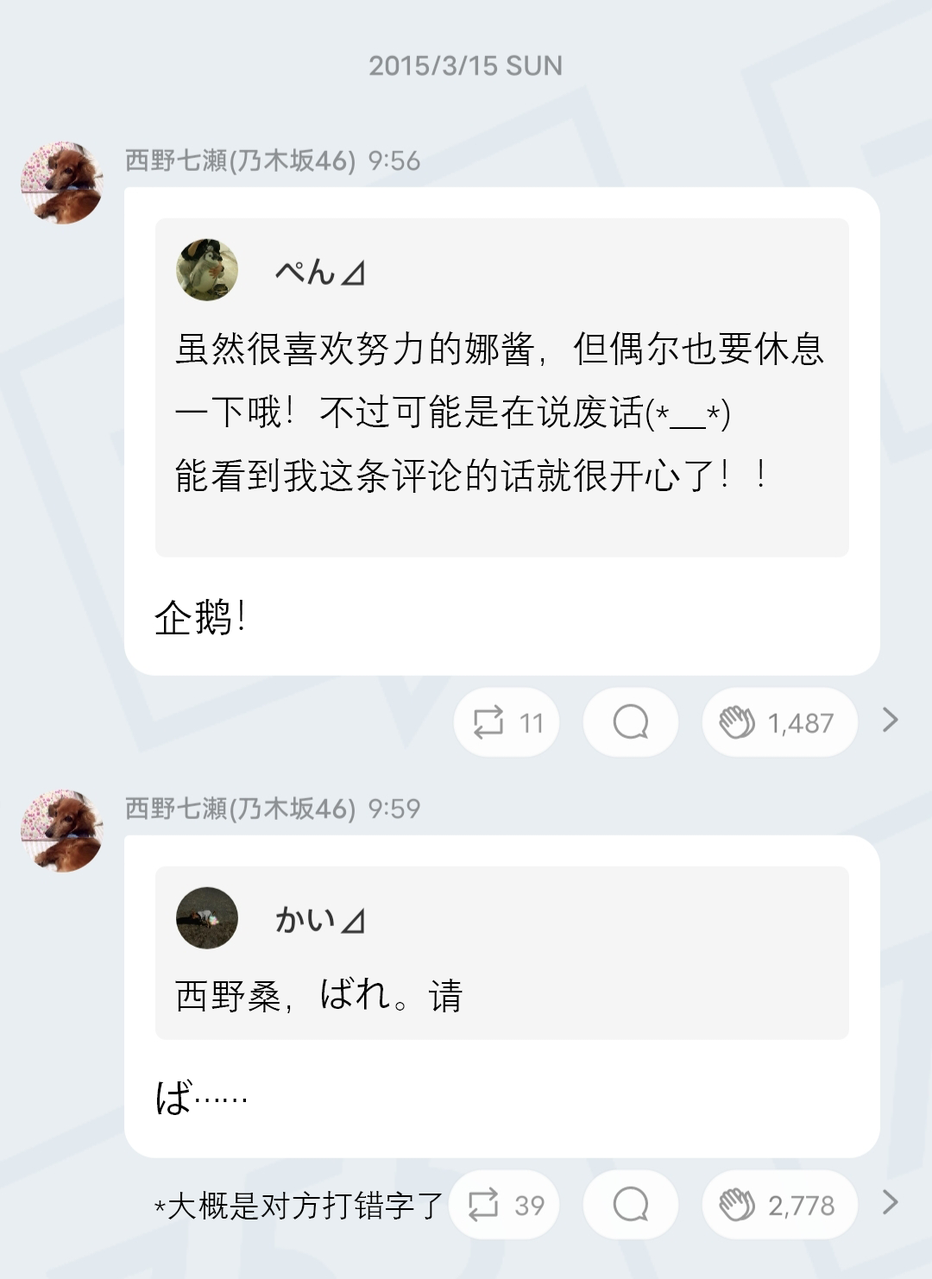
<style>
.page{position:relative;width:932px;height:1279px;background:#e9eef2}
.page>*{position:absolute;margin:0}
.t1{font:36.3px "DengXian";color:#000000}
.t2{font:39.7px "DengXian";color:#000000}
.t3{font:36.3px "KozGoPr6N-Regular";color:#000000}
.t4{font:39.7px "KozGoPr6N-Regular";color:#000000}
.t5{font:31.1px "DengXian";color:#000000}
</style>
<div class="page">
<p class="t1" style="left:175px;top:331px;width:649px;height:162px">虽然很喜欢努力的娜酱，但偶尔也要休息<br>一下哦！不过可能是在说废话(*＿*)<br>能看到我这条评论的话就很开心了！！</p>
<p class="t2" style="left:155px;top:598px;width:88px;height:37px">企鹅！</p>
<p class="t1" style="left:175px;top:976px;width:288px;height:37px">西野桑，<span class="t3">ばれ</span>。请</p>
<p class="t2" style="left:157px;top:1079px;width:89px;height:36px"><span class="t4">ば</span>……</p>
<p class="t5" style="left:155px;top:1191px;width:288px;height:29px">*大概是对方打错字了</p>
</div>
